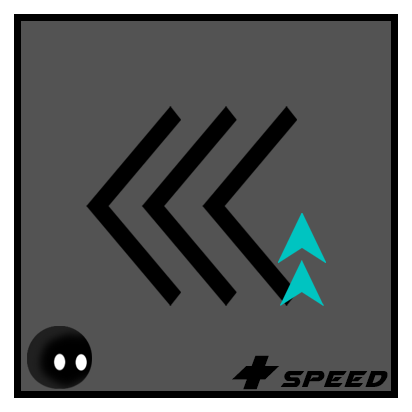
<style>
.page{position:relative;width:412px;height:412px;background:#535353}
.page>*{position:absolute;margin:0}
.t1{font:100px "Airstrike";letter-spacing:0.06em;color:#000000}
.t2{font:30px "Airstrike";letter-spacing:0.06em;color:#000000}
</style>
<div class="page">
<p class="t1" style="left:232px;top:355px;width:48px;height:35px">+</p>
<p class="t2" style="left:280px;top:371px;width:108px;height:16px">Speed</p>
</div>
